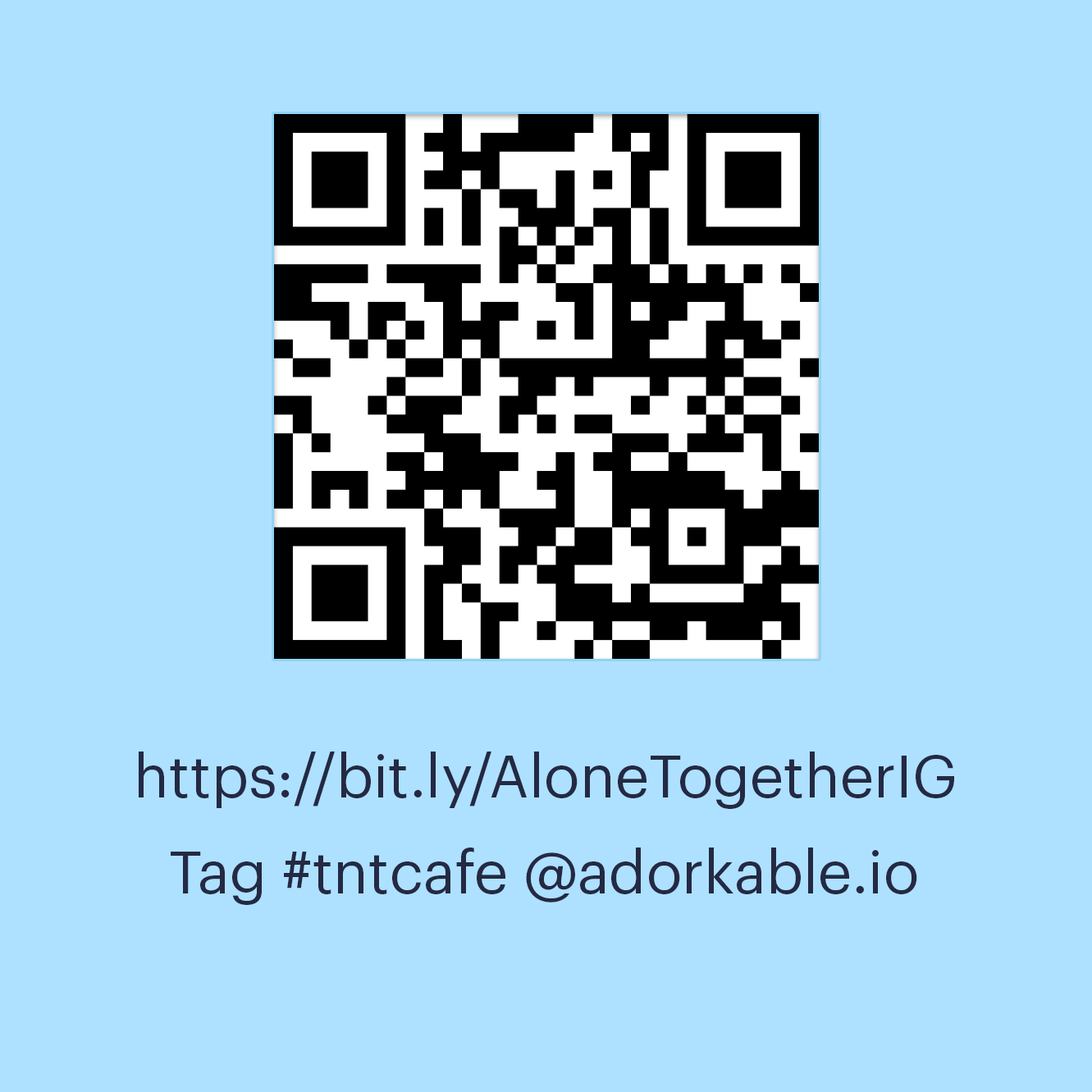
<style>
.page{position:relative;width:1092px;height:1092px;background:#aee1ff}
.page>*{position:absolute;margin:0}
.t1{font:59.1px "Graphik-Regular";color:#242944}
</style>
<div class="page">
<p class="t1" style="left:139px;top:752px;width:815px;height:57px">https://bit.ly/AloneTogetherIG</p>
<p class="t1" style="left:171px;top:847px;width:746px;height:58px">Tag #tntcafe @adorkable.io</p>
</div>
